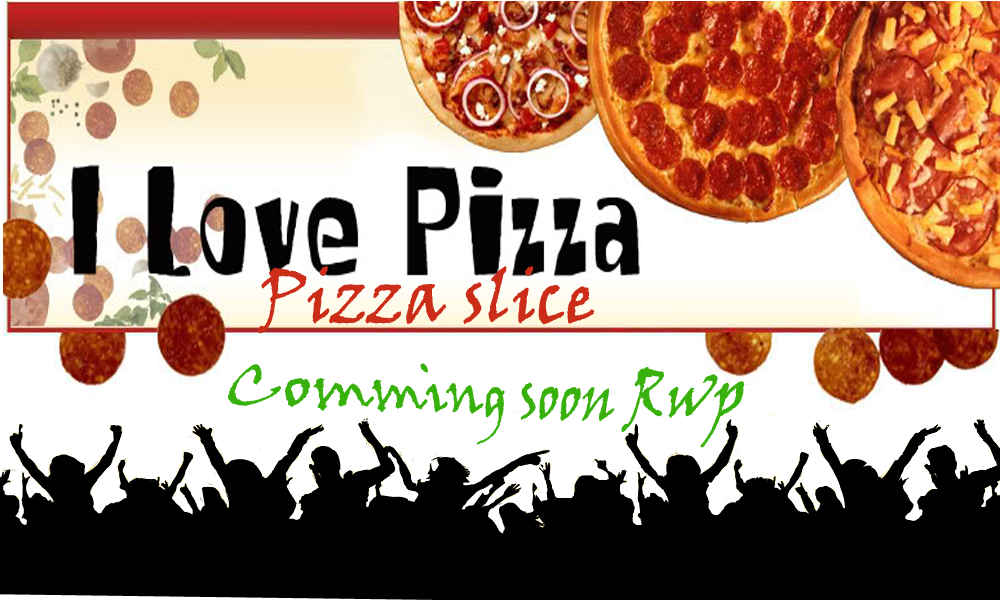
<style>
.page{position:relative;width:1000px;height:600px;background:#ffffff}
.page>*{position:absolute;margin:0}
.t1{font:71.4px "VinerHandITC";color:#cc2d18;font-weight:bold;scale:0.9 1}
.t2{font:60px "VinerHandITC";color:#38b10d}
</style>
<div class="page">
<p class="t1" style="left:257px;top:266px;width:338px;height:68px">Pizza slice</p>
<p class="t2" style="left:228px;top:363px;width:517px;height:85px">Comming soon Rwp</p>
</div>
